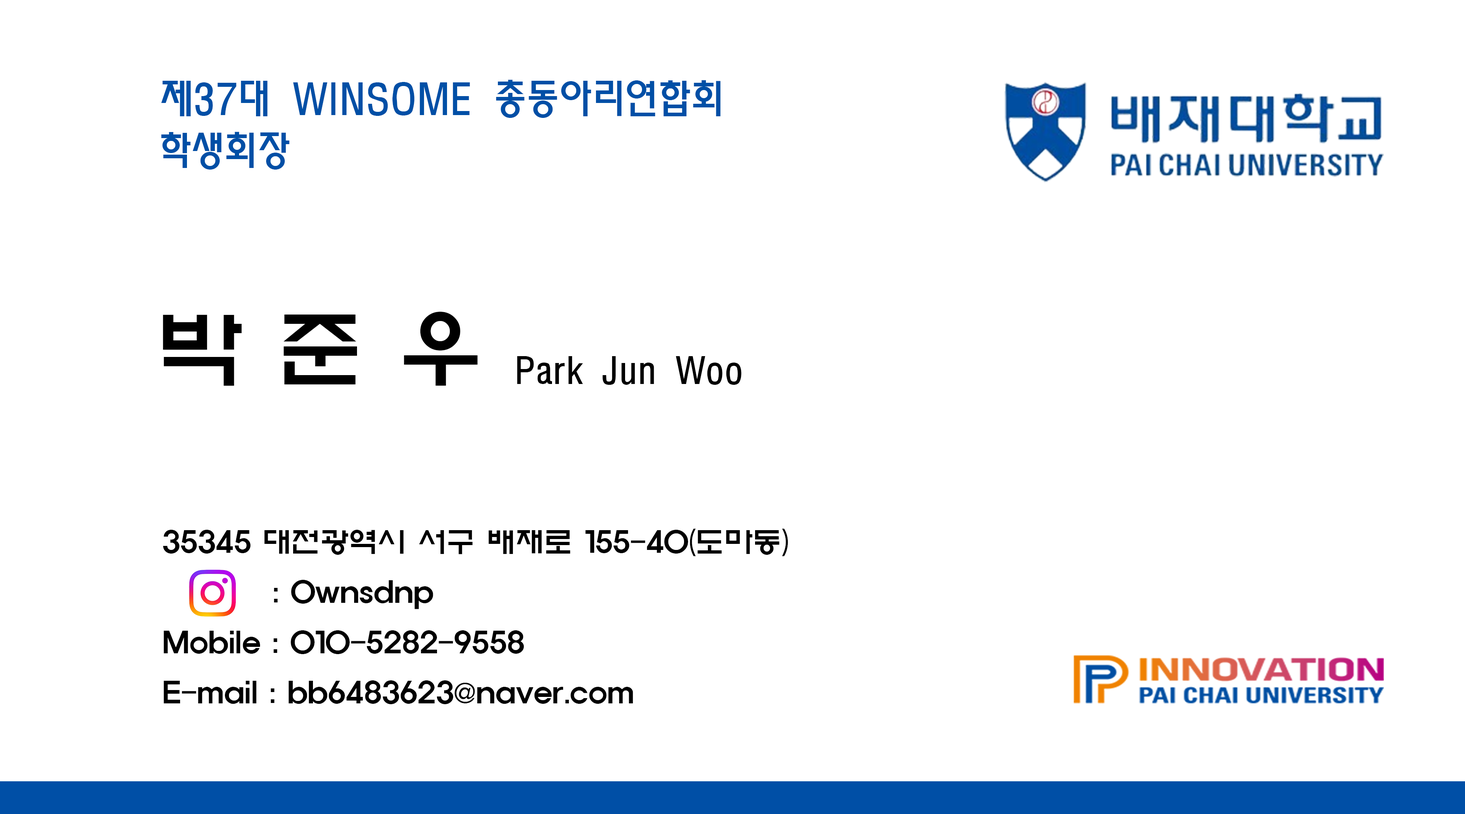
<style>
.page{position:relative;width:1465px;height:814px;background:#ffffff}
.page>*{position:absolute;margin:0}
.t1{font:40.2px "MoeumTR-HM";color:#004fa6}
.t2{font:34.5px "MoeumTR-HM";color:#000000}
.t3{font:86.1px "ExpoM-HM";color:#000000}
.t4{font:28.7px "ExpoM-HM";color:#000000}
</style>
<div class="page">
<p class="t1" style="left:161px;top:80px;width:560px;height:38px">제37대 WINSOME 총동아리연합회</p>
<p class="t1" style="left:161px;top:132px;width:129px;height:38px">학생회장</p>
<p class="t2" style="left:163px;top:312px;width:578px;height:74px"><span class="t3">박 준 우 </span>Park Jun Woo</p>
<p class="t4" style="left:163px;top:529px;width:625px;height:175px">35345 대전광역시 서구 배재로 155-40(도마동)<br>        : 0wnsdnp<br>Mobile : 010-5282-9558<br>E-mail : bb6483623@naver.com</p>
</div>
